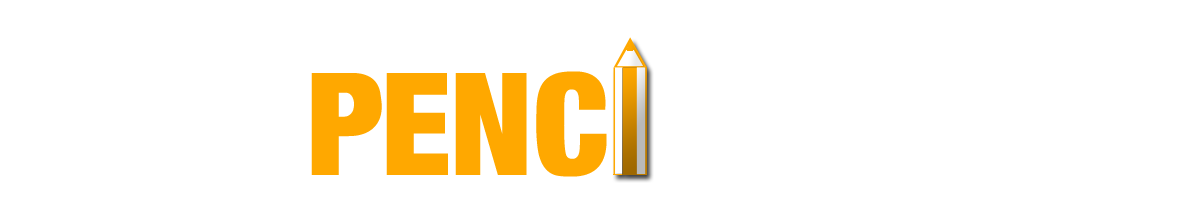
<style>
.page{position:relative;width:1200px;height:200px;background:#ffffff}
.page>*{position:absolute;margin:0}
.t1{font:141.7px "BasicSansHeavySFBold";color:#ffa800}
</style>
<div class="page">
<p class="t1" style="left:311px;top:71px;width:296px;height:106px">PENC</p>
</div>
